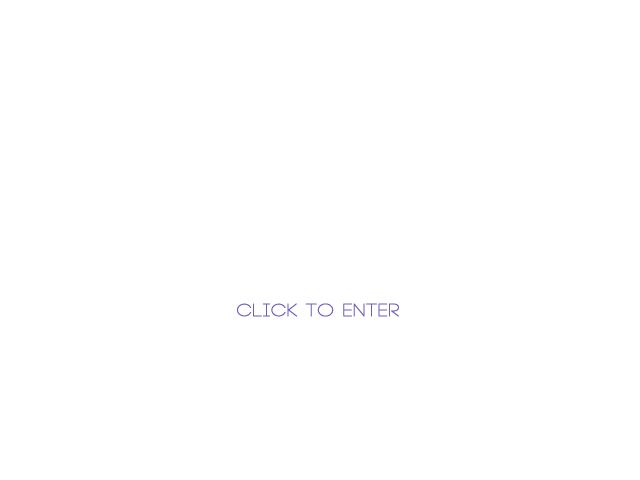
<style>
.page{position:relative;width:640px;height:480px;background:#ffffff}
.page>*{position:absolute;margin:0}
.t1{font:17.3px "Code-Light";letter-spacing:0.02em;color:#705bbb;font-weight:bold;scale:1.19 1}
</style>
<div class="page">
<p class="t1" style="left:237px;top:303px;width:162px;height:14px">click to enter</p>
</div>
